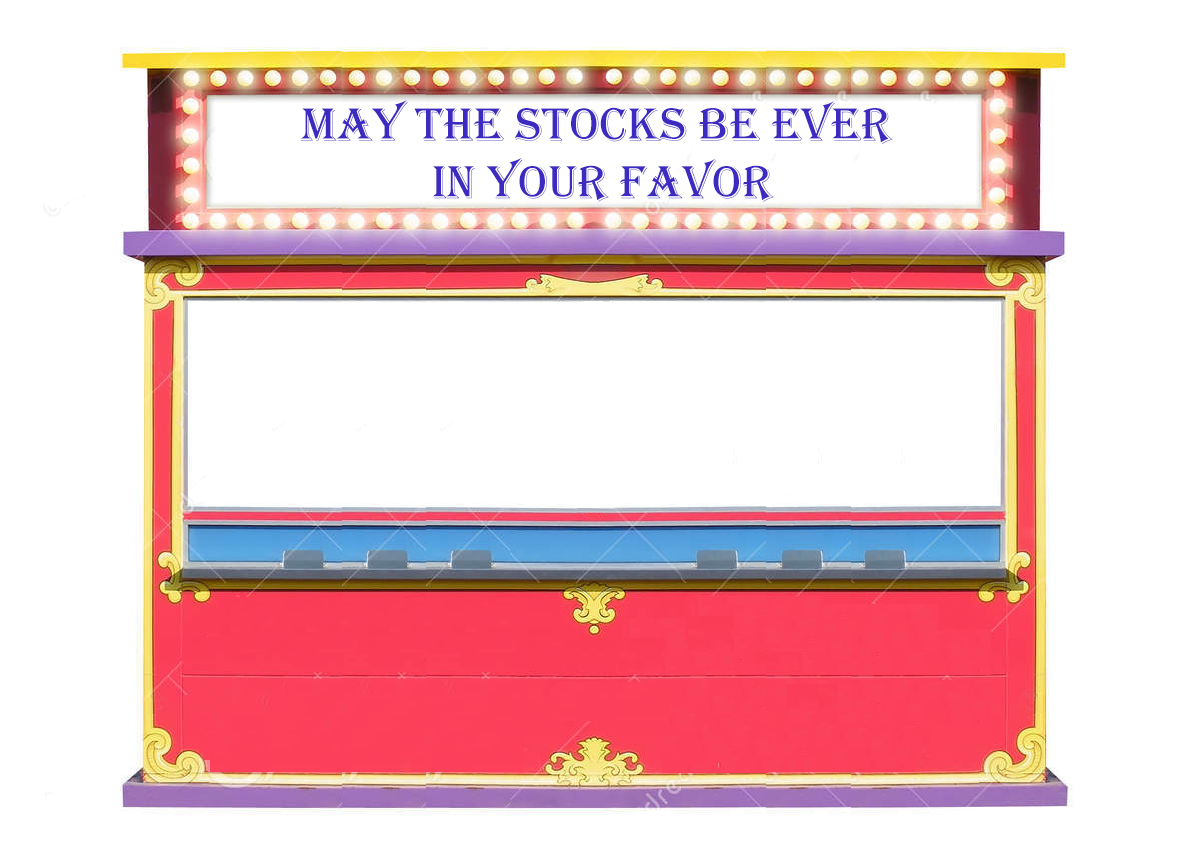
<style>
.page{position:relative;width:1199px;height:857px;background:#ffffff}
.page>*{position:absolute;margin:0}
.t1{font:48px "Algerian";color:#3c2ac1}
</style>
<div class="page">
<p class="t1" style="left:300px;top:100px;width:593px;height:102px;text-align:center">May the stocks be ever <br>in your favor</p>
</div>
